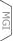
<style>
.page{position:relative;width:13px;height:41px;background:#ffffff}
.page>*{position:absolute;margin:0}
.t1{font:10px "Tahoma";letter-spacing:0.01em;color:#8e8e8e}
</style>
<div class="page">
<p class="t1" style="left:0px;top:11px;width:11px;height:19px;rotate:90deg">MGI</p>
</div>
